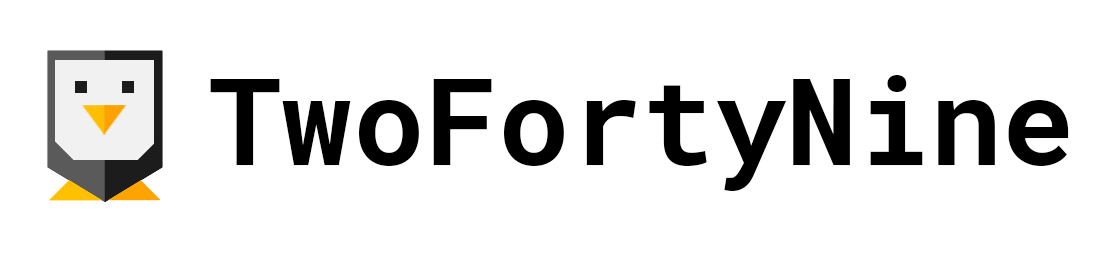
<style>
.page{position:relative;width:1114px;height:267px;background:#ffffff}
.page>*{position:absolute;margin:0}
.t1{font:120px "RobotoMonoForPowerline-Bold";color:#000000}
</style>
<div class="page">
<p class="t1" style="left:210px;top:75px;width:859px;height:116px">TwoFortyNine</p>
</div>
